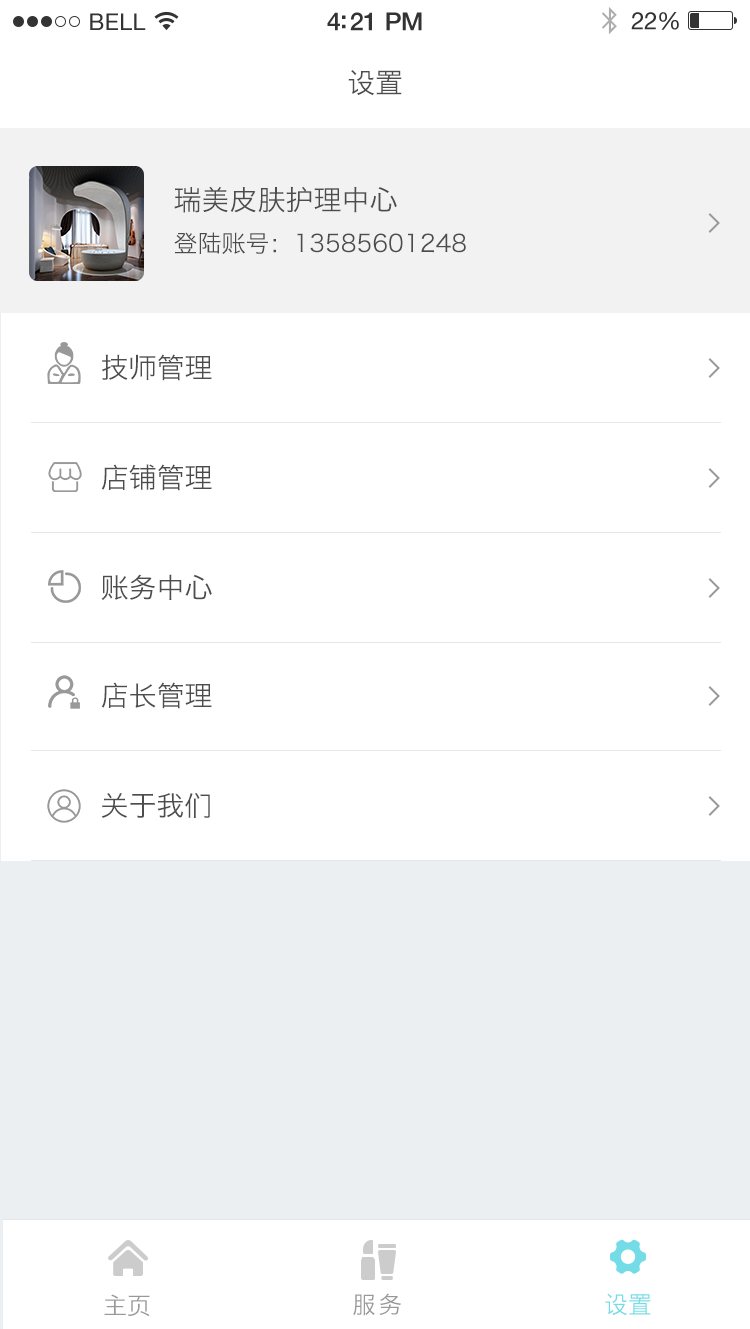
<style>
.page{position:relative;width:750px;height:1329px;background:#ffffff}
.page>*{position:absolute;margin:0}
.t1{font:28px "HiraginoSansGB-W3";color:#4d4d4d}
.t2{font:24px/42px "HiraginoSansGB-W3";color:#4c4c4c}
.t3{font:28px/42px "HiraginoSansGB-W3";color:#4c4c4c}
.t4{font:28px "HiraginoSansGB-W3";color:#4c4c4c}
.t5{font:24px "HiraginoSansGB-W3";color:#999999}
.t6{font:24px "HiraginoSansGB-W3";letter-spacing:0.1em;color:#999999}
.t7{font:24px "HiraginoSansGB-W3";color:#73dce6}
</style>
<div class="page">
<p class="t1" style="left:348px;top:70px;width:54px;height:26px">设置</p>
<p class="t2" style="left:174px;top:186px;width:292px;height:68px;text-align:justify"><span class="t3">瑞美皮肤护理中心<br></span>登陆账号：13585601248</p>
<p class="t1" style="left:102px;top:354px;width:110px;height:27px">技师管理</p>
<p class="t4" style="left:101px;top:464px;width:111px;height:27px">店铺管理</p>
<p class="t1" style="left:101px;top:574px;width:111px;height:26px">账务中心</p>
<p class="t1" style="left:101px;top:682px;width:111px;height:27px">店长管理</p>
<p class="t1" style="left:101px;top:793px;width:109px;height:25px">关于我们</p>
<p class="t5" style="left:104px;top:1294px;width:46px;height:23px">主页</p>
<p class="t6" style="left:353px;top:1293px;width:48px;height:23px">服务</p>
<p class="t7" style="left:605px;top:1293px;width:46px;height:23px">设置</p>
</div>
